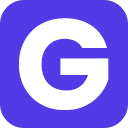
<style>
.page{position:relative;width:128px;height:128px;background:#523ae6}
.page>*{position:absolute;margin:0}
.t1{font:128px "Poppins-Bold";letter-spacing:-0.025em;color:#ffffff}
</style>
<div class="page">
<p class="t1" style="left:19px;top:18px;width:90px;height:92px">G</p>
</div>
